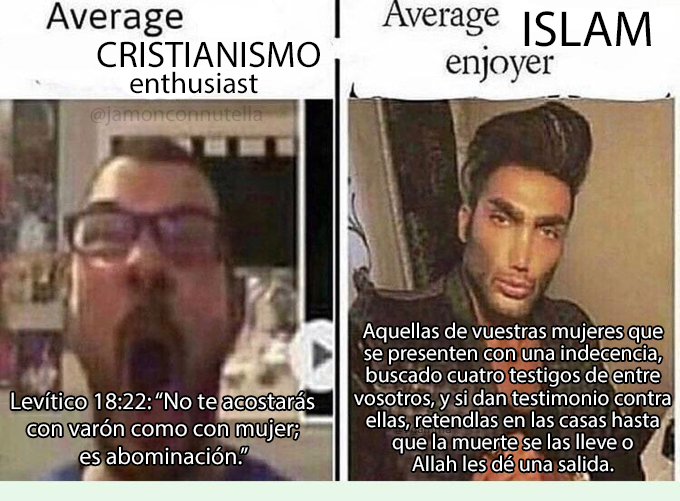
<style>
.page{position:relative;width:680px;height:501px}
.page>*{position:absolute;margin:0}
.t1{font:50.8px "MyriadPro-Regular";color:#000000}
.t2{font:37px "MyriadPro-Regular";color:#000000}
.t3{font:29.9px "MyriadPro-Regular";color:#000000}
.t4{font:22.1px "MyriadPro-Regular"}
.t5{font:21.6px "MyriadPro-Regular";color:#ffffff}
.t6{font:24px "MyriadPro-Regular";color:#ffffff}
</style>
<div class="page">
<p class="t1" style="left:524px;top:11px;width:127px;height:36px">ISLAM</p>
<p class="t2" style="left:97px;top:41px;width:223px;height:27px">CRISTIANISMO</p>
<p class="t3" style="left:130px;top:71px;width:128px;height:23px">enthusiast</p>
<p class="t4" style="left:90px;top:105px;width:172px;height:21px">@jamonconnutella</p>
<p class="t5" style="left:354px;top:322px;width:317px;height:150px;text-align:center">Aquellas de vuestras mujeres que<br>se presenten con una indecencia,<br>buscado cuatro testigos de entre<br>vosotros, y si dan testimonio contra<br>ellas, retendlas en las casas hasta<br>que la muerte se las lleve o<br>Allah les dé una salida.</p>
<p class="t6" style="left:11px;top:392px;width:304px;height:73px;text-align:center">Levítico 18:22: “No te acostarás<br>con varón como con mujer;<br>es abominación.”</p>
</div>
